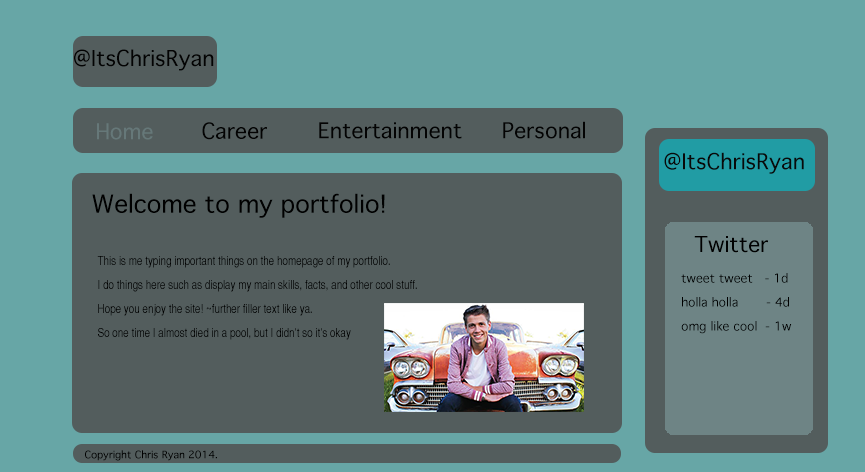
<style>
.page{position:relative;width:865px;height:472px;background:#535d5d}
.page>*{position:absolute;margin:0}
.t1{font:21px "Thonburi";color:#030303}
.t2{font:21px "Thonburi";color:#667879}
.t3{font:21px "Thonburi";color:#090909}
.t4{font:24px "Thonburi";color:#000000}
.t5{font:21px "Thonburi";color:#000000}
.t6{font:12px/24px "HelveticaCYPlain";color:#000000}
.t7{font:12px/24px "Thonburi";color:#000000}
.t8{font:10px "Thonburi";color:#000000}
</style>
<div class="page">
<p class="t1" style="left:74px;top:49px;width:140px;height:22px">@ItsChrisRyan</p>
<p class="t2" style="left:97px;top:123px;width:56px;height:17px">Home</p>
<p class="t1" style="left:202px;top:122px;width:65px;height:18px">Career</p>
<p class="t1" style="left:319px;top:122px;width:143px;height:17px">Entertainment</p>
<p class="t1" style="left:503px;top:121px;width:82px;height:18px">Personal</p>
<p class="t3" style="left:664px;top:152px;width:140px;height:22px">@ItsChrisRyan</p>
<p class="t4" style="left:92px;top:193px;width:293px;height:25px">Welcome to my portfolio!</p>
<p class="t5" style="left:694px;top:236px;width:74px;height:17px">Twitter</p>
<p class="t6" style="left:97px;top:256px;width:320px;height:84px">This is me typing important things on the homepage of my portfolio.<br>I do things here such as display my main skills, facts, and other cool stuff.<br>Hope you enjoy the site! ~further filler text like ya. <br>So one time I almost died in a pool, but I didn’t so it’s okay</p>
<p class="t7" style="left:681px;top:273px;width:111px;height:61px">tweet tweet   - 1d<br>holla holla       - 4d<br>omg like cool  - 1w</p>
<p class="t8" style="left:85px;top:450px;width:132px;height:11px">Copyright Chris Ryan 2014.</p>
</div>
